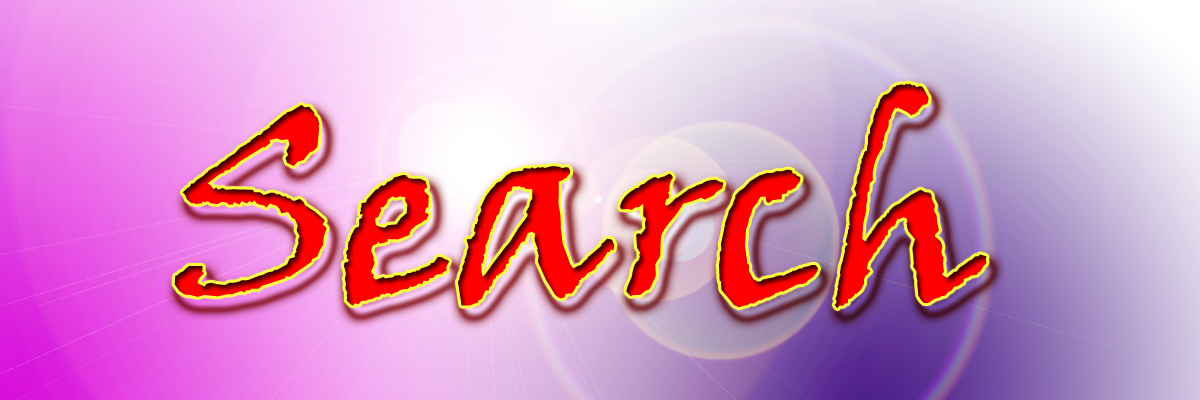
<style>
.page{position:relative;width:1200px;height:400px}
.page>*{position:absolute;margin:0}
.t1{font:254px "VinerHandITC"}
</style>
<div class="page">
<p class="t1" style="left:174px;top:83px;width:813px;height:226px">Search</p>
</div>
